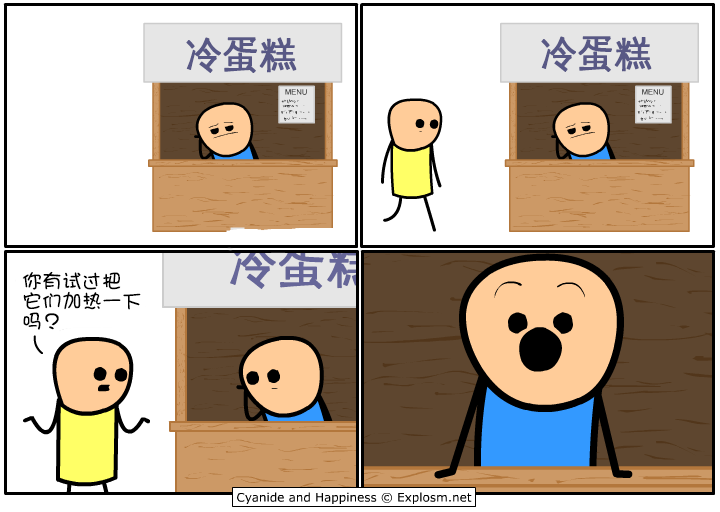
<style>
.page{position:relative;width:720px;height:512px;background:#ffffff}
.page>*{position:absolute;margin:0}
.t1{font:36px "WenQuanYiZenHeiSharp";color:#585885;font-weight:bold}
.t2{font:48px "WenQuanYiZenHeiSharp";color:#666699;font-weight:bold}
.t3{font:20px/20px "DFGirl";color:#000000}
</style>
<div class="page">
<p class="t1" style="left:186px;top:37px;width:111px;height:36px">冷蛋糕</p>
<p class="t1" style="left:541px;top:36px;width:111px;height:36px">冷蛋糕</p>
<p class="t2" style="left:229px;top:241px;width:148px;height:48px">冷蛋糕</p>
<p class="t3" style="left:22px;top:271px;width:119px;height:59px">你有试过把<br>它们加热一下<br>吗？</p>
</div>
